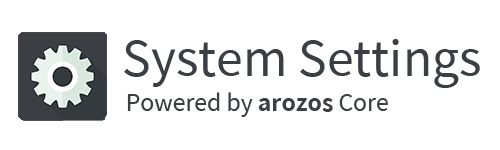
<style>
.page{position:relative;width:500px;height:150px;background:#ffffff}
.page>*{position:absolute;margin:0}
.t1{font:48px "TaipeiSansTCBeta-Regular";color:#3b3f44}
.t2{font:23px "TaipeiSansTCBeta-Regular";color:#3b3f44}
.t3{font:23px "TaipeiSansTCBeta-Bold";color:#3b3f44}
</style>
<div class="page">
<p class="t1" style="left:124px;top:39px;width:356px;height:49px">System Settings</p>
<p class="t2" style="left:127px;top:92px;width:261px;height:25px">Powered by <span class="t3">arozos</span> Core</p>
</div>
